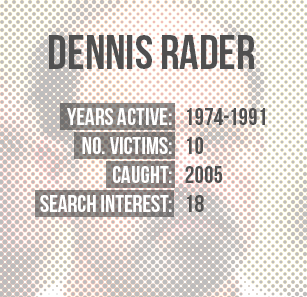
<style>
.page{position:relative;width:307px;height:297px;background:#ffffff}
.page>*{position:absolute;margin:0}
.t1{font:48px "BebasNeue";color:#505050}
.t2{font:24px "BebasNeue";color:#ffffff}
.t3{font:24px/125px "BebasNeue";color:#ffffff}
.t4{font:24px "BebasNeue";color:#505050}
.t5{font:24px/125px "BebasNeue";color:#505050}
</style>
<div class="page">
<p class="t1" style="left:49px;top:35px;width:206px;height:34px">DENNIS RADER</p>
<p class="t2" style="left:40px;top:108px;width:132px;height:104px;text-align:right"><span class="t3">YEARS ACTIVE:<br></span>No. Victims:<br>cAUGHT:<br>SEARCH INTEREST:</p>
<p class="t4" style="left:185px;top:108px;width:80px;height:104px"><span class="t5">1974-1991<br></span>10<br>2005<br>18</p>
</div>
